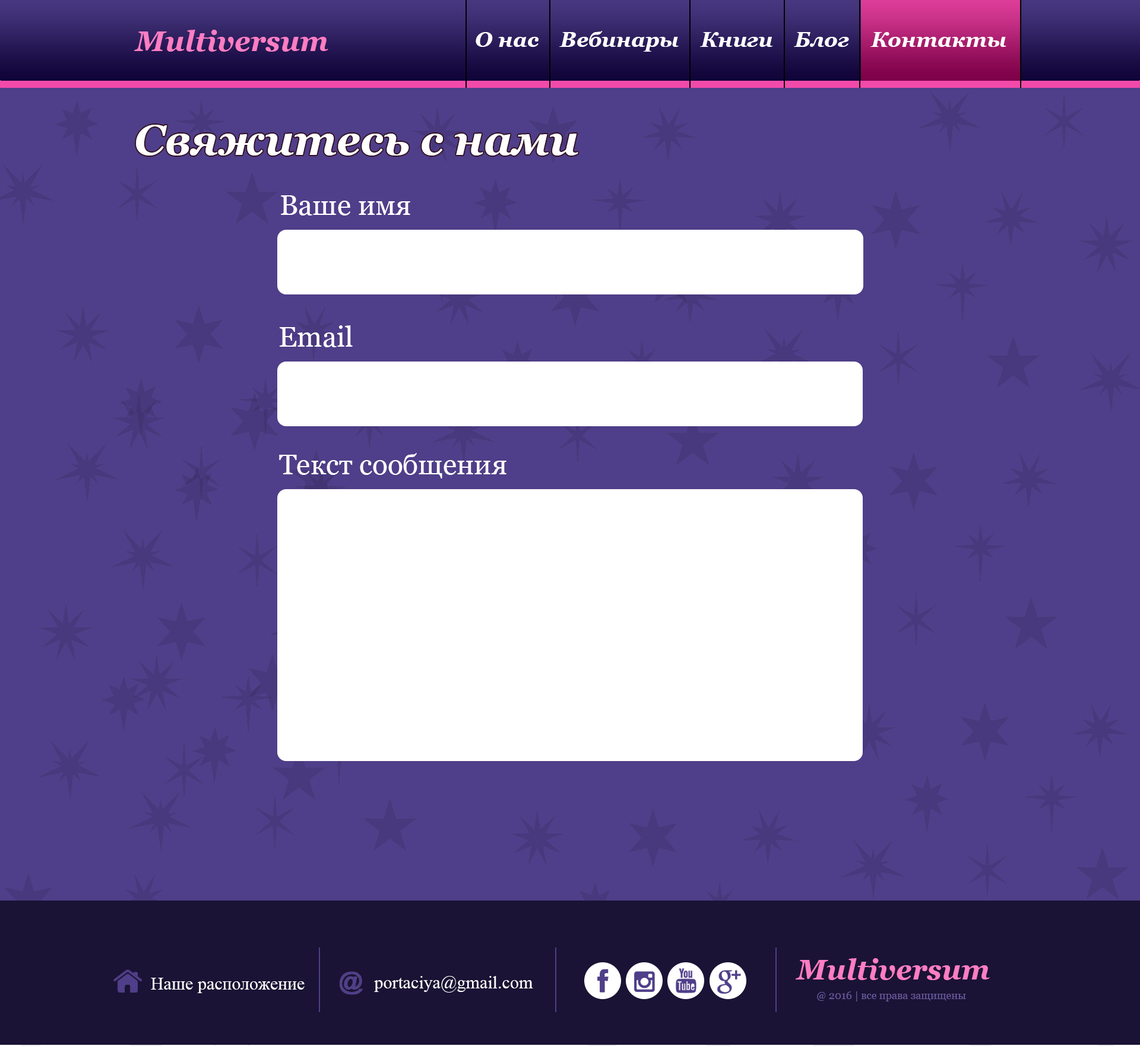
<style>
.page{position:relative;width:1140px;height:1046px;background:#4f3e89}
.page>*{position:absolute;margin:0}
.t1{font:28.5px "Georgia-BoldItalic";color:#ff7dc3}
.t2{font:21.4px "Georgia-BoldItalic";color:#ffffff}
.t3{font:42.7px "Georgia-BoldItalic";color:#ffffff}
.t4{font:28.5px "Georgia";color:#ffffff}
.t5{font:17.8px "TimesNewRomanPSMT";color:#ffffff}
.t6{font:10.7px "Georgia";color:#68599d}
</style>
<div class="page">
<p class="t1" style="left:134px;top:30px;width:194px;height:22px">Multiversum</p>
<p class="t2" style="left:476px;top:31px;width:530px;height:21px">О нас    Вебинары    Книги    Блог    Контакты</p>
<p class="t3" style="left:136px;top:125px;width:442px;height:31px">Свяжитесь с нами</p>
<p class="t4" style="left:281px;top:195px;width:129px;height:21px">Ваше имя</p>
<p class="t4" style="left:280px;top:325px;width:73px;height:22px">Email</p>
<p class="t4" style="left:279px;top:453px;width:227px;height:26px">Текст сообщения</p>
<p class="t1" style="left:796px;top:958px;width:194px;height:22px">Multiversum</p>
<p class="t5" style="left:151px;top:978px;width:154px;height:15px">Наше расположение</p>
<p class="t5" style="left:374px;top:976px;width:159px;height:17px">portaciya@gmail.com</p>
<p class="t6" style="left:817px;top:991px;width:149px;height:11px">@ 2016 | все права защищены</p>
</div>
